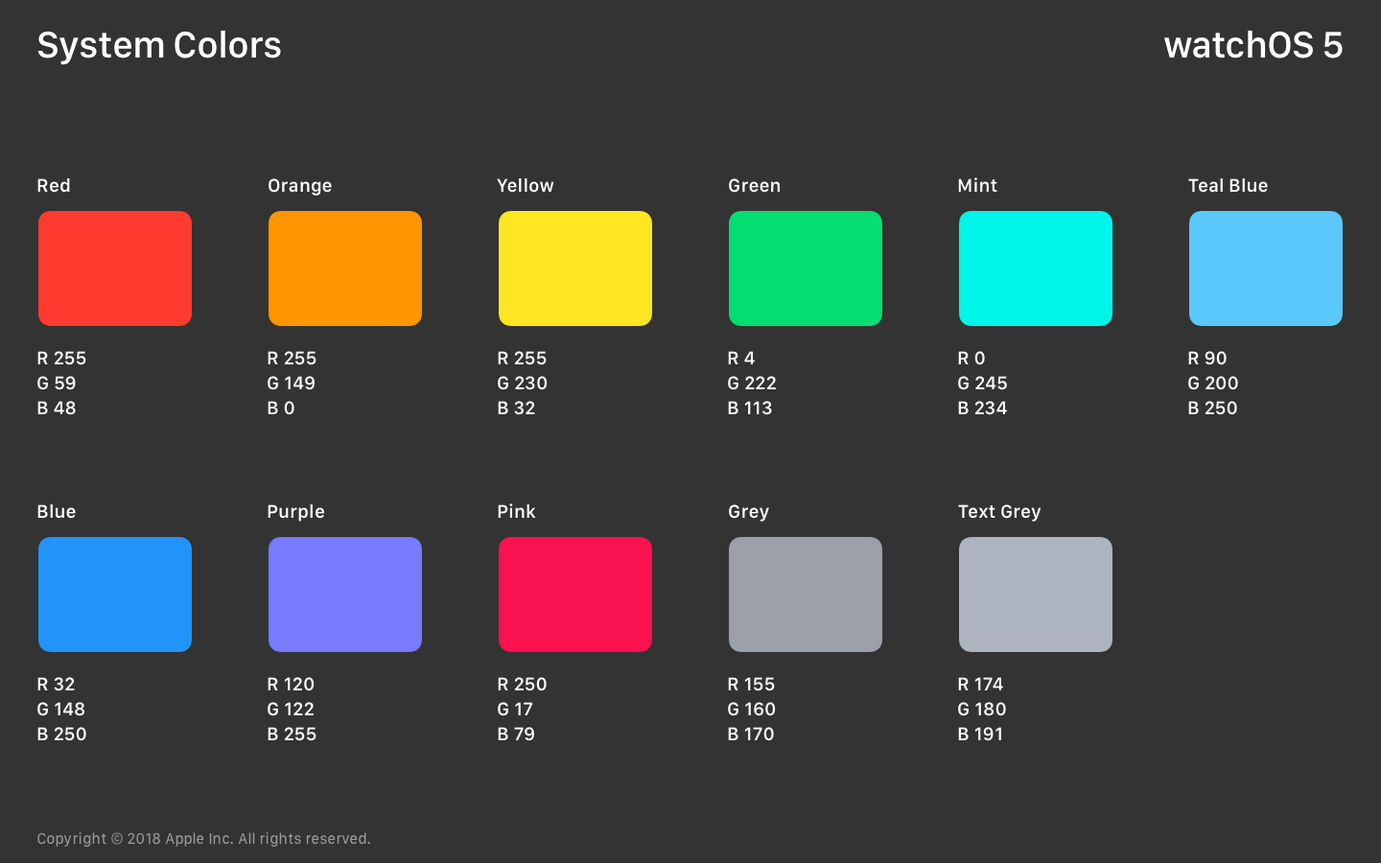
<style>
.page{position:relative;width:1381px;height:863px;background:#333333}
.page>*{position:absolute;margin:0}
.t1{font:38.4px "SFCompactText-Medium";letter-spacing:-0.026em;color:#ffffff}
.t2{font:19.2px "SFCompactText-Medium";color:#ffffff}
.t3{font:19.2px/24.9px "SFCompactText-Medium";color:#ffffff}
.t4{font:15.3px "SFCompactText-Regular";color:#999999}
</style>
<div class="page">
<p class="t1" style="left:37px;top:30px;width:244px;height:35px">System Colors</p>
<p class="t1" style="left:1164px;top:30px;width:179px;height:29px">watchOS 5</p>
<p class="t2" style="left:37px;top:178px;width:33px;height:15px">Red</p>
<p class="t2" style="left:269px;top:178px;width:63px;height:18px">Orange</p>
<p class="t2" style="left:497px;top:178px;width:57px;height:15px">Yellow</p>
<p class="t2" style="left:729px;top:178px;width:51px;height:15px">Green</p>
<p class="t2" style="left:958px;top:177px;width:40px;height:16px">Mint</p>
<p class="t2" style="left:1188px;top:178px;width:80px;height:15px">Teal Blue</p>
<p class="t3" style="left:37px;top:351px;width:49px;height:64px">R 255<br>G 59<br>B 48</p>
<p class="t3" style="left:268px;top:351px;width:49px;height:64px">R 255 <br>G 149<br>B 0</p>
<p class="t3" style="left:498px;top:351px;width:50px;height:64px">R 255<br>G 230<br>B 32</p>
<p class="t3" style="left:728px;top:351px;width:48px;height:64px">R 4<br>G 222<br>B 113</p>
<p class="t3" style="left:958px;top:351px;width:49px;height:64px">R 0<br>G 245<br>B 234</p>
<p class="t3" style="left:1188px;top:351px;width:50px;height:64px">R 90<br>G 200<br>B 250</p>
<p class="t2" style="left:37px;top:505px;width:39px;height:14px">Blue</p>
<p class="t2" style="left:268px;top:505px;width:56px;height:17px">Purple</p>
<p class="t2" style="left:498px;top:504px;width:38px;height:14px">Pink</p>
<p class="t2" style="left:729px;top:505px;width:40px;height:17px">Grey</p>
<p class="t2" style="left:958px;top:505px;width:84px;height:17px">Text Grey</p>
<p class="t3" style="left:37px;top:677px;width:49px;height:64px">R 32 <br>G 148<br>B 250</p>
<p class="t3" style="left:268px;top:677px;width:49px;height:64px">R 120<br>G 122<br>B 255</p>
<p class="t3" style="left:498px;top:677px;width:49px;height:64px">R 250<br>G 17<br>B 79</p>
<p class="t3" style="left:728px;top:677px;width:48px;height:64px">R 155<br>G 160<br>B 170</p>
<p class="t3" style="left:958px;top:677px;width:48px;height:64px">R 174<br>G 180<br>B 191</p>
<p class="t4" style="left:37px;top:833px;width:333px;height:14px">Copyright © 2018 Apple Inc. All rights reserved.</p>
</div>
